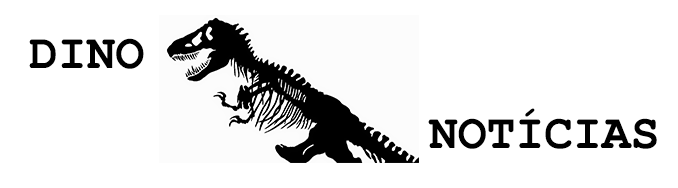
<style>
.page{position:relative;width:678px;height:188px;background:#ffffff}
.page>*{position:absolute;margin:0}
.t1{font:48px "CourierNewPS-BoldMT";color:#000000}
</style>
<div class="page">
<p class="t1" style="left:29px;top:38px;width:115px;height:31px">DINO</p>
<p class="t1" style="left:428px;top:108px;width:229px;height:41px">NOTÍCIAS</p>
</div>
